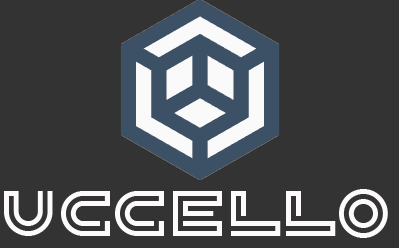
<style>
.page{position:relative;width:399px;height:248px;background:#333333}
.page>*{position:absolute;margin:0}
.t1{font:64px "Garde";color:#fcfafa}
</style>
<div class="page">
<p class="t1" style="left:4px;top:189px;width:384px;height:49px">Uccello</p>
</div>
